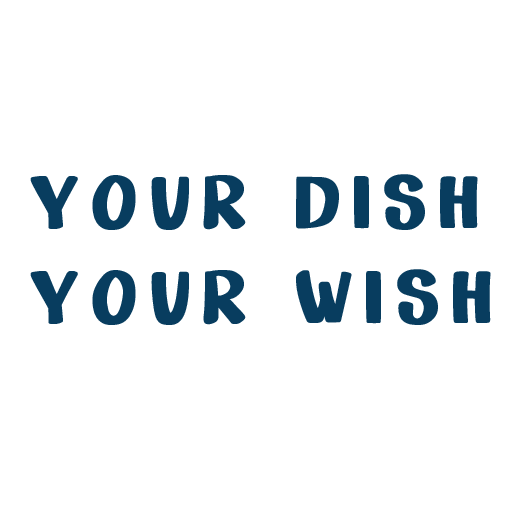
<style>
.page{position:relative;width:512px;height:512px;background:#ffffff}
.page>*{position:absolute;margin:0}
.t1{font:71.8px/95px "Sandy";letter-spacing:0.15em;color:#083d5f;font-weight:bold}
</style>
<div class="page">
<p class="t1" style="left:30px;top:174px;width:461px;height:151px">YOUR DISH<br>YOUR WISH</p>
</div>
